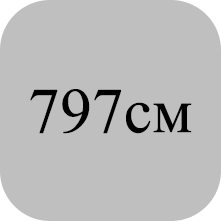
<style>
.page{position:relative;width:221px;height:221px;background:#bfbfbf}
.page>*{position:absolute;margin:0}
.t1{font:63.9px "TimesNewRomanPSMT";color:#000000}
</style>
<div class="page">
<p class="t1" style="left:30px;top:89px;width:162px;height:45px">797см</p>
</div>
